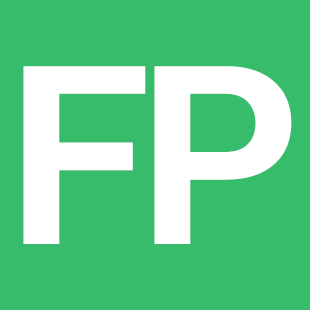
<style>
.page{position:relative;width:310px;height:310px;background:#37bc6c}
.page>*{position:absolute;margin:0}
.t1{font:250px "Roboto-Bold";letter-spacing:-0.05em;color:#ffffff}
</style>
<div class="page">
<p class="t1" style="left:23px;top:66px;width:269px;height:178px">FP</p>
</div>
